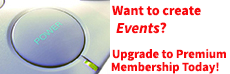
<style>
.page{position:relative;width:230px;height:74px;background:#ffffff}
.page>*{position:absolute;margin:0}
.t1{font:13.9px "SourceSansPro-Bold";color:#f8090e}
.t2{font:15.3px "SourceSansPro-BoldIt";color:#f8090e}
.t3{font:15.3px "SourceSansPro-Bold";color:#f8090e}
.t4{font:12.5px "SourceSansPro-Bold";color:#f8090e}
</style>
<div class="page">
<p class="t1" style="left:112px;top:5px;width:89px;height:11px">Want to create</p>
<p class="t2" style="left:116px;top:22px;width:51px;height:12px">Events<span class="t3">?</span></p>
<p class="t4" style="left:112px;top:48px;width:114px;height:13px">Upgrade to Premium</p>
<p class="t4" style="left:111px;top:61px;width:108px;height:13px">Membership Today!</p>
</div>
